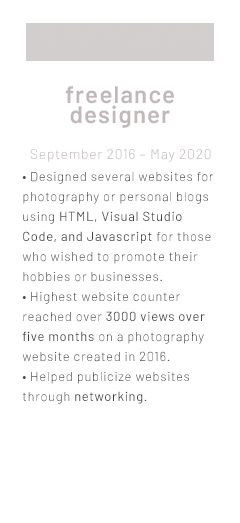
<style>
.page{position:relative;width:240px;height:523px;background:#ffffff}
.page>*{position:absolute;margin:0}
.t1{font:24px "Barlow-SemiBold";letter-spacing:0.05em;color:#c1b9b9}
.t2{font:14px "Barlow-Light";letter-spacing:0.05em;color:#c1b9b9}
.t3{font:13px/20px "Barlow-Light";letter-spacing:0.05em;color:#414141}
.t4{font:13px/20px "Barlow-Regular";letter-spacing:0.05em;color:#414141}
</style>
<div class="page">
<p class="t1" style="left:65px;top:86px;width:109px;height:18px">freelance</p>
<p class="t1" style="left:70px;top:105px;width:100px;height:23px">designer</p>
<p class="t2" style="left:30px;top:149px;width:181px;height:13px">September 2016 – May 2020</p>
<p class="t3" style="left:22px;top:172px;width:192px;height:232px">• Designed several websites for photography or personal blogs using <span class="t4">HTML, Visual Studio Code, and Javascript</span> for those who wished to promote their hobbies or businesses.<br>• Highest website counter reached over <span class="t4">3000 views over five months</span> on a photography website created in 2016.<br>• Helped publicize websites through <span class="t4">networking</span>.</p>
</div>
